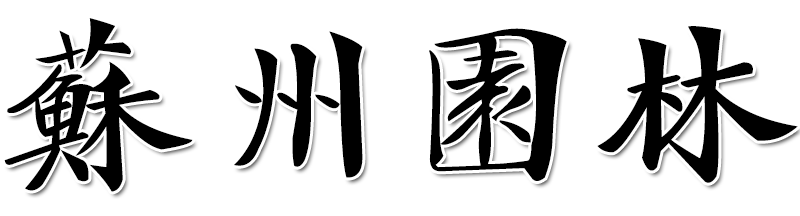
<style>
.page{position:relative;width:800px;height:216px;background:#ffffff}
.page>*{position:absolute;margin:0}
.t1{font:199.7px "zikutanghzkt";color:#000000}
</style>
<div class="page">
<p class="t1" style="left:4px;top:18px;width:794px;height:174px">苏州园林</p>
</div>
